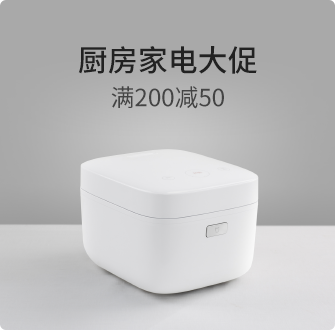
<style>
.page{position:relative;width:335px;height:330px;background:#a9a9a9}
.page>*{position:absolute;margin:0}
.t1{font:30px "SourceHanSansCN-Medium";color:#222222}
.t2{font:24px "SourceHanSansCN-Regular";color:#444444}
</style>
<div class="page">
<p class="t1" style="left:78px;top:46px;width:179px;height:28px">厨房家电大促</p>
<p class="t2" style="left:111px;top:86px;width:113px;height:23px">满200减50</p>
</div>
